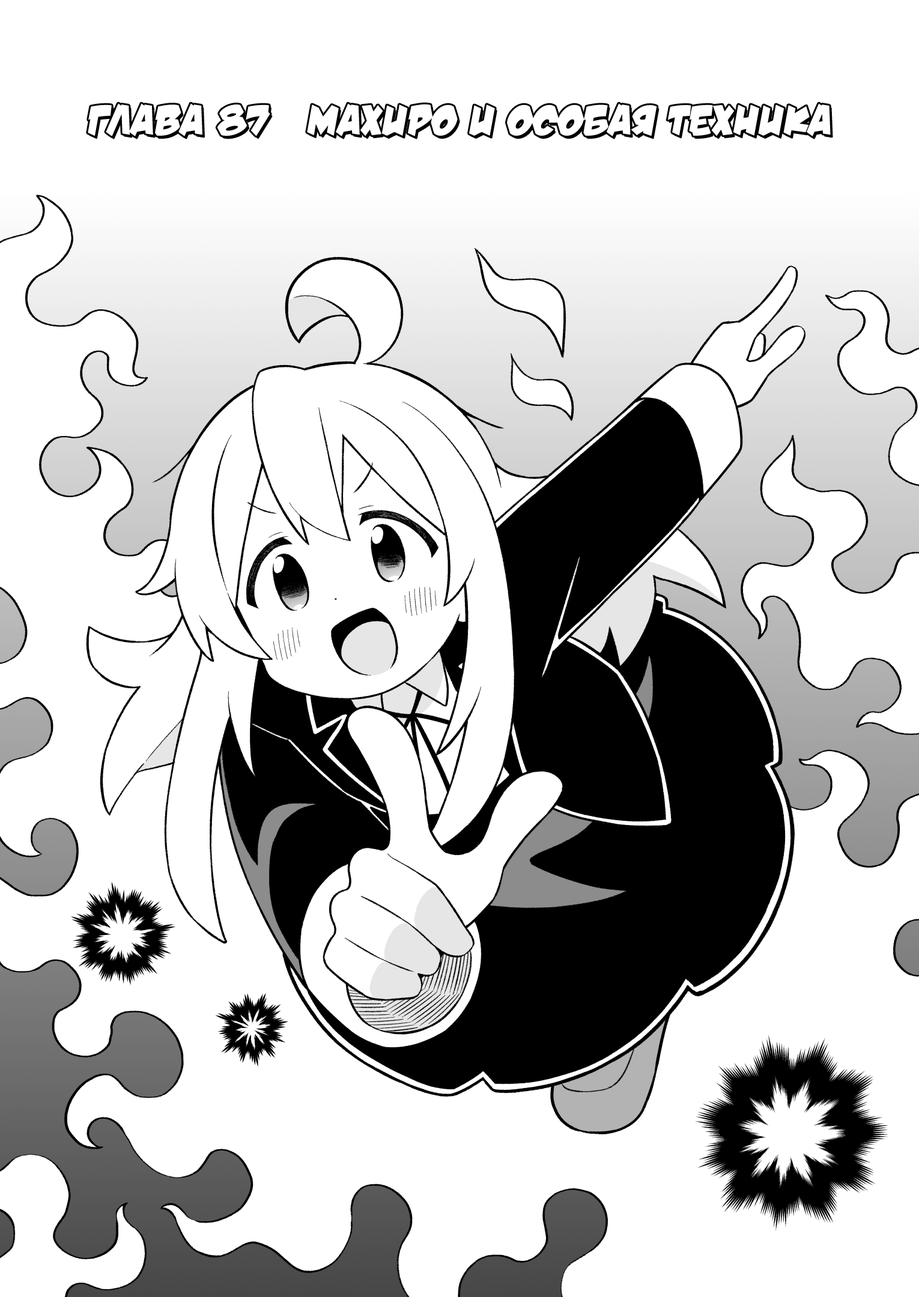
<style>
.page{position:relative;width:919px;height:1297px;background:#ffffff}
.page>*{position:absolute;margin:0}
.t1{font:43.2px "v_DamnNoisyKids";color:#ffffff;text-transform:uppercase}
</style>
<div class="page">
<p class="t1" style="left:88px;top:103px;width:743px;height:33px">Глава 87   Махиро и особая техника</p>
</div>
